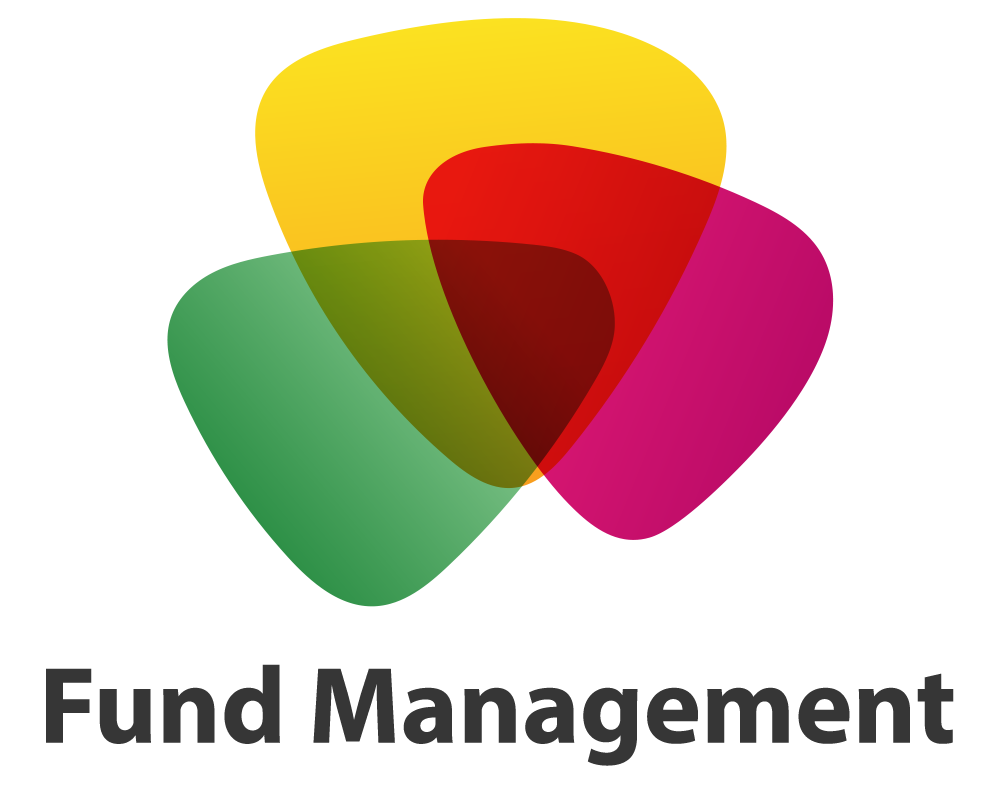
<style>
.page{position:relative;width:1000px;height:808px;background:#ffffff}
.page>*{position:absolute;margin:0}
.t1{font:109.5px "MyriadPro-Bold";color:#363636}
</style>
<div class="page">
<p class="t1" style="left:46px;top:664px;width:908px;height:102px">Fund Management</p>
</div>
